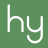
<style>
.page{position:relative;width:48px;height:48px;background:#5c905c}
.page>*{position:absolute;margin:0}
.t1{font:30px "LTOksana";color:#ffffff}
</style>
<div class="page">
<p class="t1" style="left:7px;top:4px;width:36px;height:40px">hy</p>
</div>
